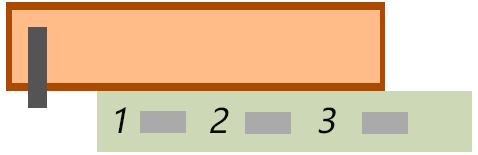
<style>
.page{position:relative;width:478px;height:155px;background:#ffbb88}
.page>*{position:absolute;margin:0}
.t1{font:33.3px "MicrosoftYaHei";color:#090909;font-style:italic}
</style>
<div class="page">
<p class="t1" style="left:115px;top:107px;width:221px;height:27px">1        2         3</p>
</div>
